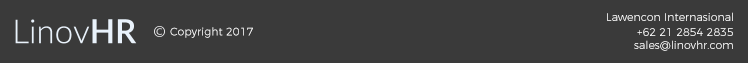
<style>
.page{position:relative;width:748px;height:63px;background:#3a3a3a}
.page>*{position:absolute;margin:0}
.t1{font:11px "Montserrat-Light";color:#fefefe}
</style>
<div class="page">
<p class="t1" style="left:607px;top:12px;width:126px;height:9px">Lawencon Internasional</p>
<p class="t1" style="left:170px;top:27px;width:83px;height:11px">Copyright 2017</p>
<p class="t1" style="left:637px;top:28px;width:96px;height:8px">+62 21 2854 2835</p>
<p class="t1" style="left:634px;top:40px;width:99px;height:11px">sales@linovhr.com</p>
</div>
